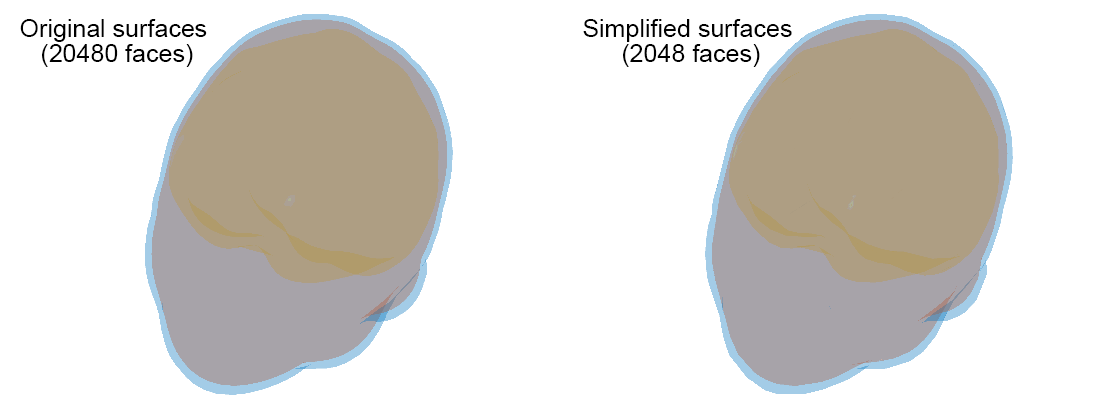
<style>
.page{position:relative;width:1120px;height:420px;background:#ffffff}
.page>*{position:absolute;margin:0}
.t1{font:25px "ArialMT";color:#000000}
</style>
<div class="page">
<p class="t1" style="left:20px;top:19px;width:187px;height:48px;text-align:center">Original surfaces <br>(20480 faces)</p>
<p class="t1" style="left:583px;top:19px;width:209px;height:48px;text-align:center">Simplified surfaces <br>(2048 faces)</p>
</div>
